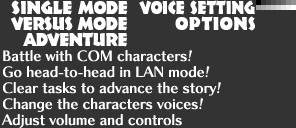
<style>
.page{position:relative;width:296px;height:128px;background:#333333}
.page>*{position:absolute;margin:0}
.t1{font:14px/16px "ChiaroStd-B";color:#ffffff}
</style>
<div class="page">
<p class="t1" style="left:1px;top:50px;width:220px;height:78px">Battle with COM characters!<br>Go head-to-head in LAN mode!<br>Clear tasks to advance the story!<br>Change the characters voices!<br>Adjust volume and controls</p>
</div>
